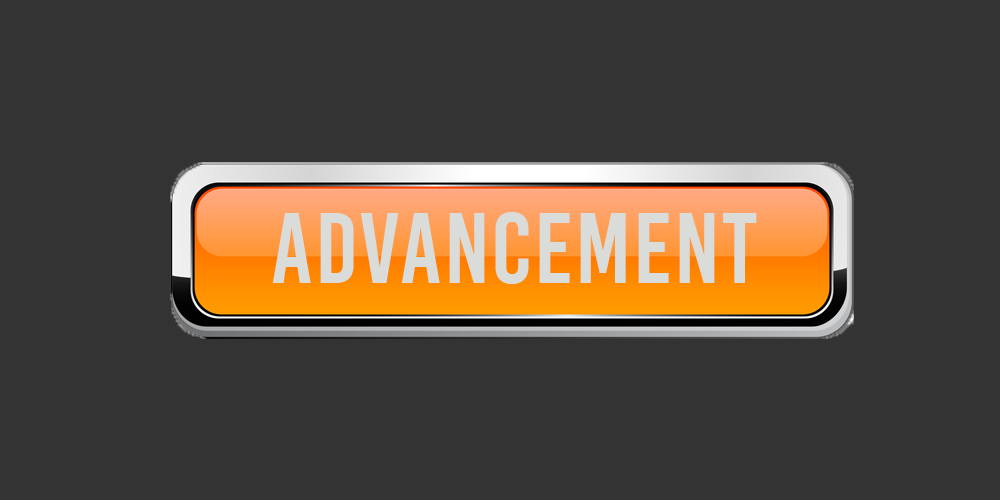
<style>
.page{position:relative;width:1000px;height:500px;background:#333333}
.page>*{position:absolute;margin:0}
.t1{font:100px "BebasKai";letter-spacing:0.02em;color:#dadcd9}
</style>
<div class="page">
<p class="t1" style="left:272px;top:212px;width:485px;height:72px">advancement</p>
</div>
